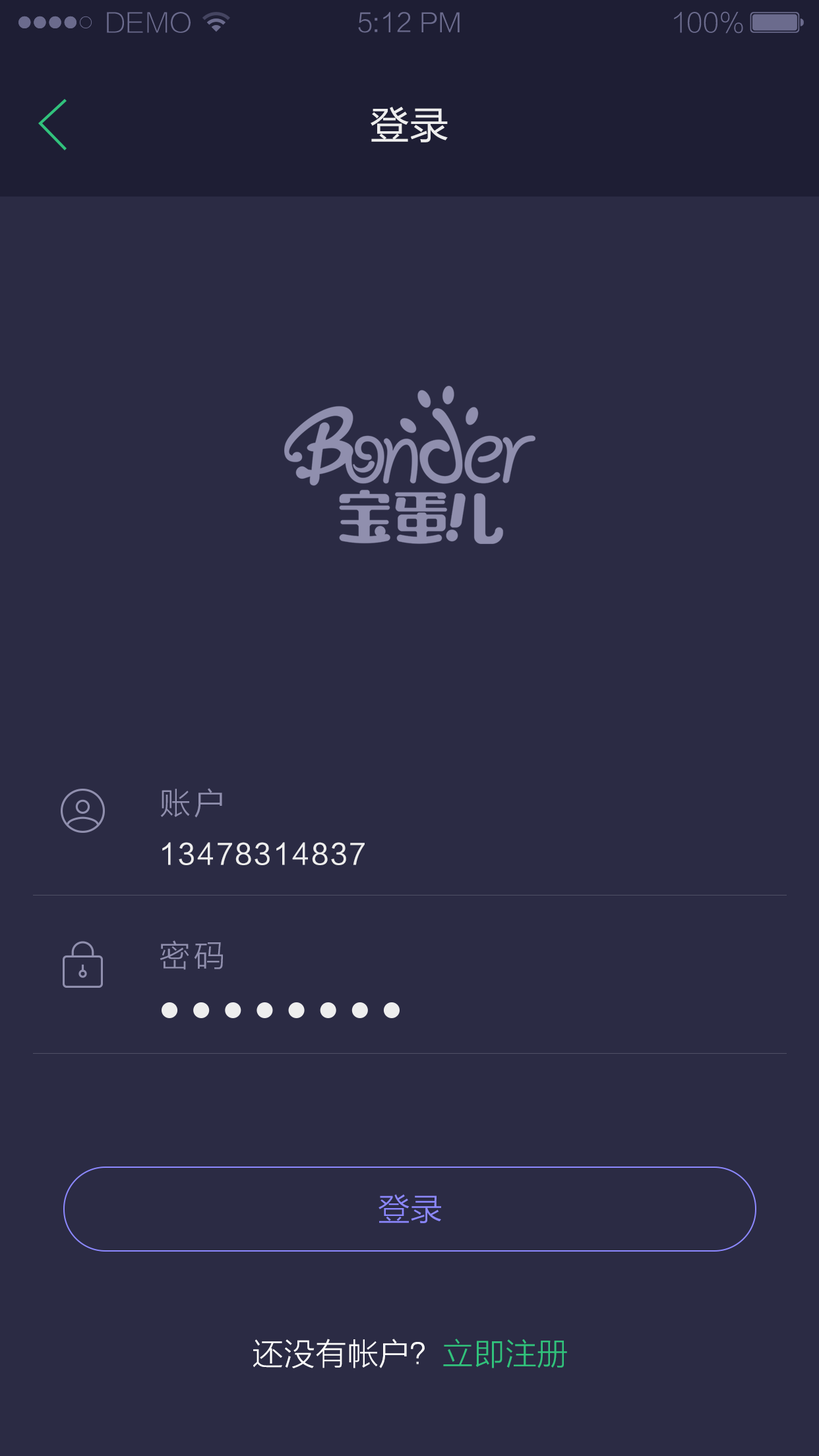
<style>
.page{position:relative;width:819px;height:1456px;background:#2b2b44}
.page>*{position:absolute;margin:0}
.t1{font:26.2px "FZLTXHK--GBK1-0";color:#6b6b8d;text-transform:uppercase}
.t2{font:26.2px "FZLTXHK";color:#6b6b8d}
.t3{font:26.2px "FZLTXHK--GBK1-0";color:#6b6b8d}
.t4{font:39.3px "FZLTHJW--GB1-0";color:#eeeeee;text-transform:uppercase}
.t5{font:31.7px "FZLTXHK";letter-spacing:0.1em;color:#908fae}
.t6{font:28.2px "FZLTHJW--GB1-0";letter-spacing:0.065em;color:#eeeeee}
.t7{font:32.3px "FZLTXHK";color:#8c88ff}
.t8{font:31.7px "FZLTXHK";color:#ffffff}
.t9{font:31.7px "FZLTXHK";color:#31c27c}
</style>
<div class="page">
<p class="t1" style="left:107px;top:12px;width:84px;height:21px">demo</p>
<p class="t2" style="left:358px;top:12px;width:102px;height:21px">5:12 PM</p>
<p class="t3" style="left:674px;top:11px;width:69px;height:23px">100%</p>
<p class="t4" style="left:371px;top:107px;width:77px;height:35px">登录</p>
<p class="t5" style="left:160px;top:788px;width:62px;height:30px">账户</p>
<p class="t6" style="left:162px;top:842px;width:203px;height:23px">13478314837</p>
<p class="t5" style="left:160px;top:940px;width:63px;height:30px">密码</p>
<p class="t7" style="left:379px;top:1194px;width:62px;height:29px">登录</p>
<p class="t8" style="left:253px;top:1339px;width:314px;height:29px">还没有帐户？<span class="t9">立即注册</span></p>
</div>
